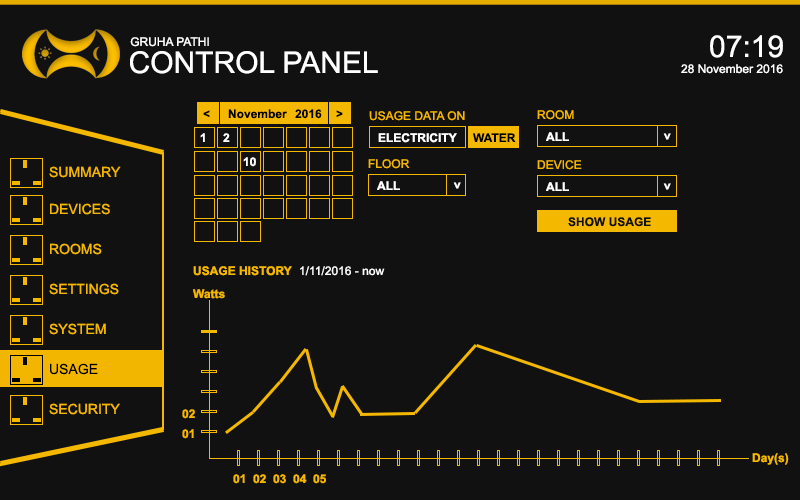
<style>
.page{position:relative;width:800px;height:500px;background:#111111}
.page>*{position:absolute;margin:0}
.t1{font:12px "ArialMT";color:#ffffff}
.t2{font:30px "ArialMT";color:#ffffff}
.t3{font:12px "Arial-BoldMT";color:#000000}
.t4{font:12px "ArialMT";color:#f5b800}
.t5{font:12px "Arial-BoldMT";color:#ffffff}
.t6{font:12px "Arial-BoldMT";color:#ffffff;text-transform:uppercase}
.t7{font:12px "Arial-BoldMT";color:#000000;text-transform:uppercase}
.t8{font:14px "ArialMT";color:#f2b600}
.t9{font:14px "ArialMT";color:#f5b800}
.t10{font:12px "Arial-BoldMT";color:#111111;text-transform:uppercase}
.t11{font:12px "Arial-BoldMT";color:#f5b800}
.t12{font:14px "ArialMT";color:#000000}
</style>
<div class="page">
<p class="t1" style="left:130px;top:37px;width:79px;height:10px">GRUHA PATHI</p>
<p class="t2" style="left:710px;top:35px;width:73px;height:23px">07:19</p>
<p class="t2" style="left:130px;top:51px;width:248px;height:23px">CONTROL PANEL</p>
<p class="t1" style="left:681px;top:64px;width:102px;height:10px">28 November 2016</p>
<p class="t3" style="left:203px;top:110px;width:7px;height:8px">&lt;</p>
<p class="t3" style="left:228px;top:109px;width:59px;height:10px">November</p>
<p class="t3" style="left:295px;top:109px;width:27px;height:10px">2016</p>
<p class="t3" style="left:336px;top:110px;width:7px;height:8px;rotate:180deg">&lt;</p>
<p class="t4" style="left:369px;top:111px;width:96px;height:10px">USAGE DATA ON</p>
<p class="t4" style="left:537px;top:110px;width:37px;height:10px">ROOM</p>
<p class="t5" style="left:200px;top:133px;width:5px;height:9px">1</p>
<p class="t5" style="left:223px;top:133px;width:7px;height:9px">2</p>
<p class="t6" style="left:378px;top:133px;width:79px;height:10px">Electricity</p>
<p class="t7" style="left:473px;top:133px;width:43px;height:9px">WATER</p>
<p class="t6" style="left:546px;top:132px;width:23px;height:9px">ALL</p>
<p class="t5" style="left:663px;top:133px;width:8px;height:7px;rotate:-90deg">&lt;</p>
<p class="t5" style="left:243px;top:157px;width:13px;height:10px">10</p>
<p class="t4" style="left:368px;top:159px;width:42px;height:10px">FLOOR</p>
<p class="t4" style="left:537px;top:160px;width:45px;height:10px">DEVICE</p>
<p class="t8" style="left:49px;top:166px;width:72px;height:12px">SUMMARY</p>
<p class="t6" style="left:377px;top:181px;width:23px;height:9px">ALL</p>
<p class="t5" style="left:453px;top:182px;width:8px;height:7px;rotate:-90deg">&lt;</p>
<p class="t6" style="left:546px;top:182px;width:23px;height:9px">ALL</p>
<p class="t5" style="left:663px;top:183px;width:8px;height:7px;rotate:-90deg">&lt;</p>
<p class="t9" style="left:50px;top:203px;width:60px;height:12px">DEVICES</p>
<p class="t10" style="left:568px;top:217px;width:83px;height:10px">Show Usage</p>
<p class="t9" style="left:50px;top:243px;width:52px;height:12px">ROOMS</p>
<p class="t11" style="left:193px;top:266px;width:99px;height:10px">USAGE HISTORY</p>
<p class="t1" style="left:300px;top:266px;width:85px;height:10px">1/11/2016 - now</p>
<p class="t9" style="left:49px;top:283px;width:70px;height:12px">SETTINGS</p>
<p class="t11" style="left:193px;top:289px;width:32px;height:10px">Watts</p>
<p class="t9" style="left:49px;top:323px;width:57px;height:12px">SYSTEM</p>
<p class="t12" style="left:50px;top:363px;width:48px;height:12px">USAGE</p>
<p class="t9" style="left:49px;top:403px;width:71px;height:12px">SECURITY</p>
<p class="t11" style="left:182px;top:409px;width:13px;height:10px">02</p>
<p class="t11" style="left:182px;top:429px;width:12px;height:10px">01</p>
<p class="t11" style="left:752px;top:453px;width:37px;height:12px">Day(s)</p>
<p class="t11" style="left:233px;top:474px;width:12px;height:10px">01</p>
<p class="t11" style="left:253px;top:474px;width:13px;height:10px">02</p>
<p class="t11" style="left:273px;top:474px;width:13px;height:10px">03</p>
<p class="t11" style="left:293px;top:474px;width:14px;height:10px">04</p>
<p class="t11" style="left:313px;top:474px;width:13px;height:10px">05</p>
</div>
